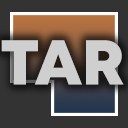
<style>
.page{position:relative;width:128px;height:128px;background:#333333}
.page>*{position:absolute;margin:0}
.t1{font:63.3px "Mont-HeavyDEMO";color:#cfcfcf}
</style>
<div class="page">
<p class="t1" style="left:1px;top:40px;width:123px;height:45px">TAR</p>
</div>
